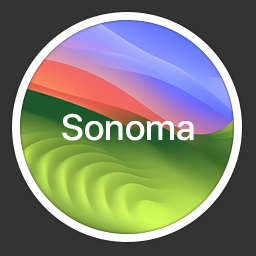
<style>
.page{position:relative;width:256px;height:256px;background:#333333}
.page>*{position:absolute;margin:0}
.t1{font:36.6px "SFProDisplay-Medium";color:#ffffff}
</style>
<div class="page">
<p class="t1" style="left:62px;top:113px;width:132px;height:28px">Sonoma</p>
</div>
